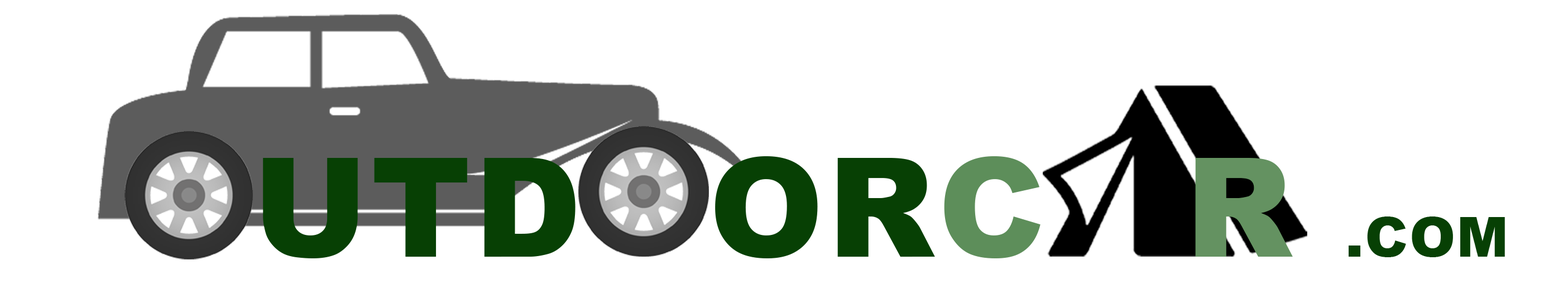
<style>
.page{position:relative;width:1568px;height:284px;background:#ffffff}
.page>*{position:absolute;margin:0}
.t1{font:137.7px "Arial-Black";letter-spacing:0.025em;color:#074004}
.t2{font:137.7px "Arial-Black";letter-spacing:0.025em;color:#5d8e5a}
.t3{font:137.7px "Arial-Black";letter-spacing:0.025em;color:#649261}
.t4{font:55.1px "Arial-Black";letter-spacing:0.025em;color:#074004}
</style>
<div class="page">
<p class="t1" style="left:263px;top:156px;width:1242px;height:102px">UTD          OR<span class="t2">C      </span><span class="t3">R </span><span class="t4">.COM</span></p>
</div>
